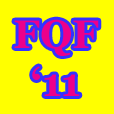
<style>
.page{position:relative;width:114px;height:114px;background:#ffff00}
.page>*{position:absolute;margin:0}
.t1{font:39.9px "Georgia-Bold";color:#ec008b}
</style>
<div class="page">
<p class="t1" style="left:14px;top:19px;width:85px;height:77px;text-align:center">FQF<br>‘11</p>
</div>
